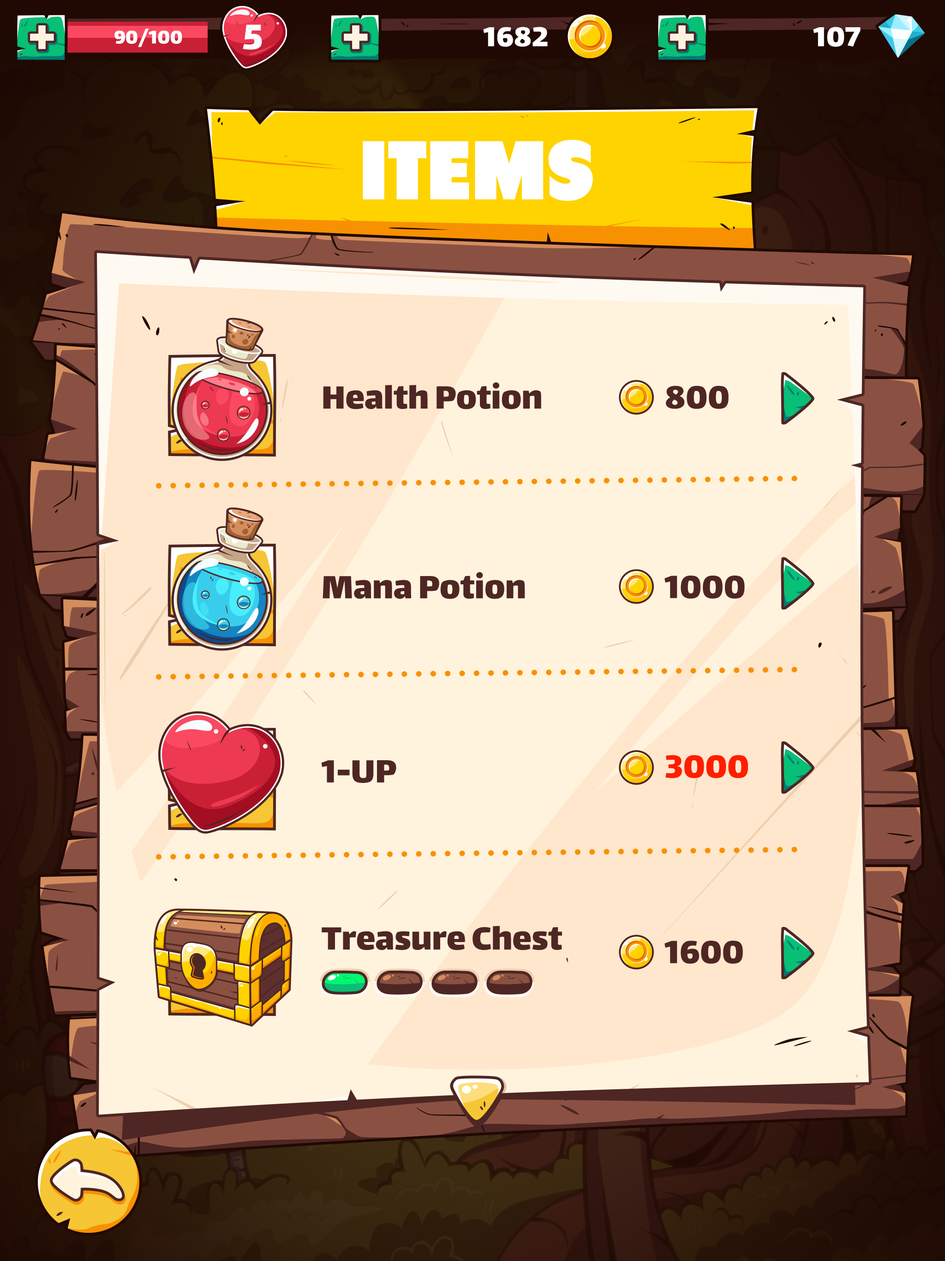
<style>
.page{position:relative;width:945px;height:1261px;background:#fff3dd}
.page>*{position:absolute;margin:0}
.t1{font:57.2px "Lalezar-Regular";color:#fff3dd}
.t2{font:22.2px "Lalezar-Regular";color:#ffffff}
.t3{font:42.5px "Lalezar-Regular";color:#ffffff}
.t4{font:33.2px "Lalezar-Regular";color:#ffffff}
.t5{font:83.1px "Tondu-Beta";color:#ffffff;text-transform:uppercase}
.t6{font:38.8px "Lalezar-Regular";color:#4e2623}
.t7{font:38.8px "Lalezar-Regular";color:#ff1e00}
</style>
<div class="page">
<p class="t1" style="left:30px;top:25px;width:24px;height:24px">+</p>
<p class="t2" style="left:114px;top:29px;width:68px;height:18px">90/100</p>
<p class="t3" style="left:243px;top:24px;width:19px;height:26px">5</p>
<p class="t1" style="left:344px;top:25px;width:24px;height:24px">+</p>
<p class="t4" style="left:483px;top:27px;width:65px;height:20px">1682</p>
<p class="t1" style="left:670px;top:25px;width:24px;height:24px">+</p>
<p class="t4" style="left:813px;top:27px;width:48px;height:20px">107</p>
<p class="t5" style="left:363px;top:140px;width:230px;height:61px">items</p>
<p class="t6" style="left:323px;top:382px;width:219px;height:27px">Health Potion</p>
<p class="t6" style="left:666px;top:386px;width:63px;height:23px">800</p>
<p class="t6" style="left:323px;top:572px;width:202px;height:27px">Mana Potion</p>
<p class="t6" style="left:665px;top:576px;width:80px;height:23px">1000</p>
<p class="t6" style="left:321px;top:760px;width:76px;height:23px">1-UP</p>
<p class="t7" style="left:666px;top:755px;width:83px;height:23px">3000</p>
<p class="t6" style="left:322px;top:926px;width:240px;height:25px">Treasure Chest</p>
<p class="t6" style="left:665px;top:941px;width:78px;height:23px">1600</p>
</div>
